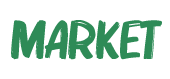
<style>
.page{position:relative;width:170px;height:79px;background:#ffffff}
.page>*{position:absolute;margin:0}
.t1{font:55px "Bruzh";color:#2e8b57}
</style>
<div class="page">
<p class="t1" style="left:11px;top:20px;width:151px;height:40px">Market</p>
</div>
